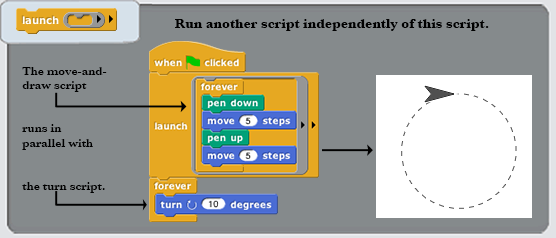
<style>
.page{position:relative;width:556px;height:238px;background:#858a8c}
.page>*{position:absolute;margin:0}
.t1{font:14px "Baskerville-Bold";color:#000000}
.t2{font:12px "Baskerville-SemiBold";color:#000000}
</style>
<div class="page">
<p class="t1" style="left:175px;top:19px;width:314px;height:12px">Run another script independently of this script.</p>
<p class="t2" style="left:22px;top:67px;width:85px;height:126px">The move-and-<br>draw script<br><br><br>runs in<br>parallel with<br><br><br>the turn script.</p>
</div>
